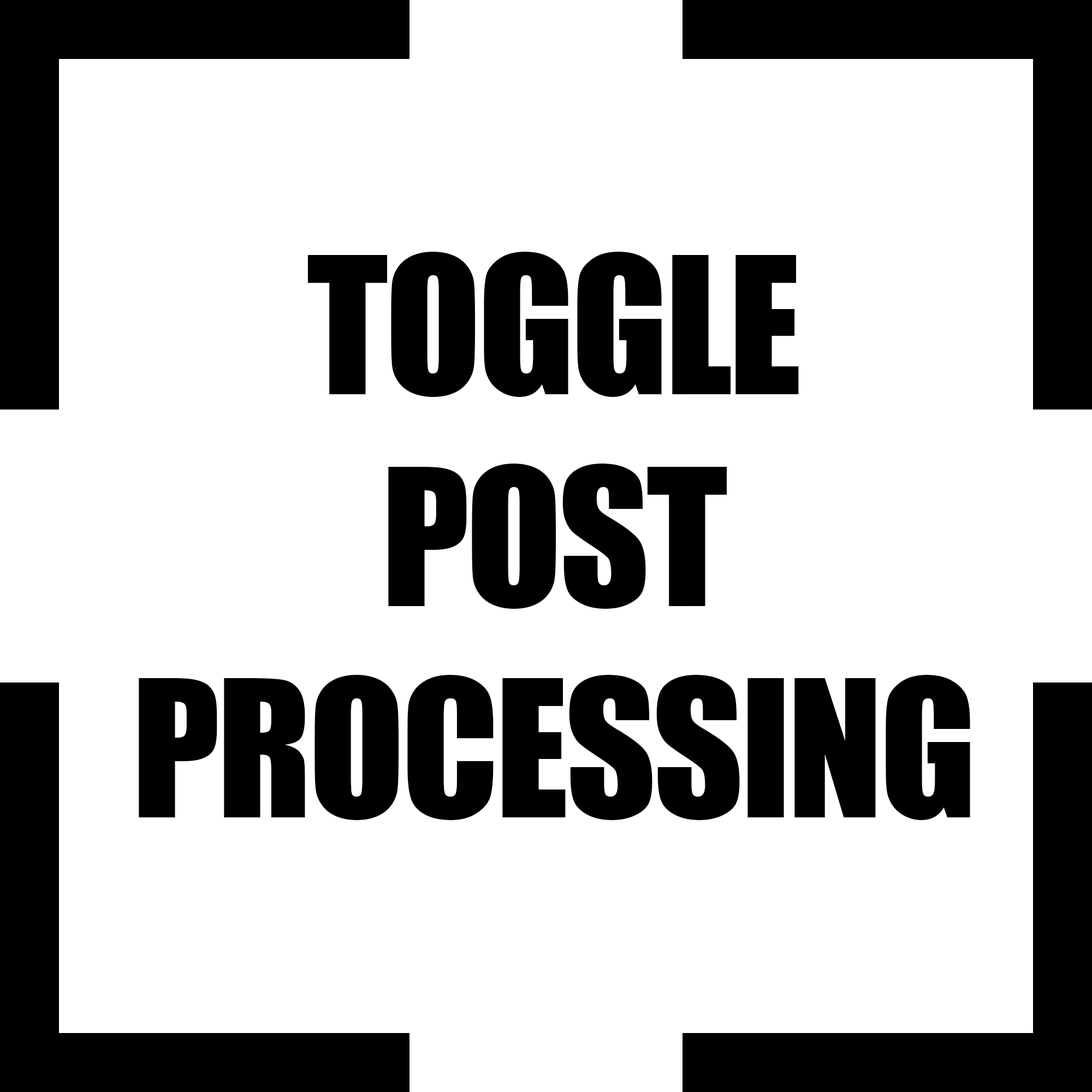
<style>
.page{position:relative;width:1092px;height:1092px;background:#ffffff}
.page>*{position:absolute;margin:0}
.t1{font:176.4px "Impact";letter-spacing:-0.02em;color:#000000}
</style>
<div class="page">
<p class="t1" style="left:139px;top:252px;width:831px;height:568px;text-align:center">TOGGLE<br>POST<br>PROCESSING</p>
</div>
